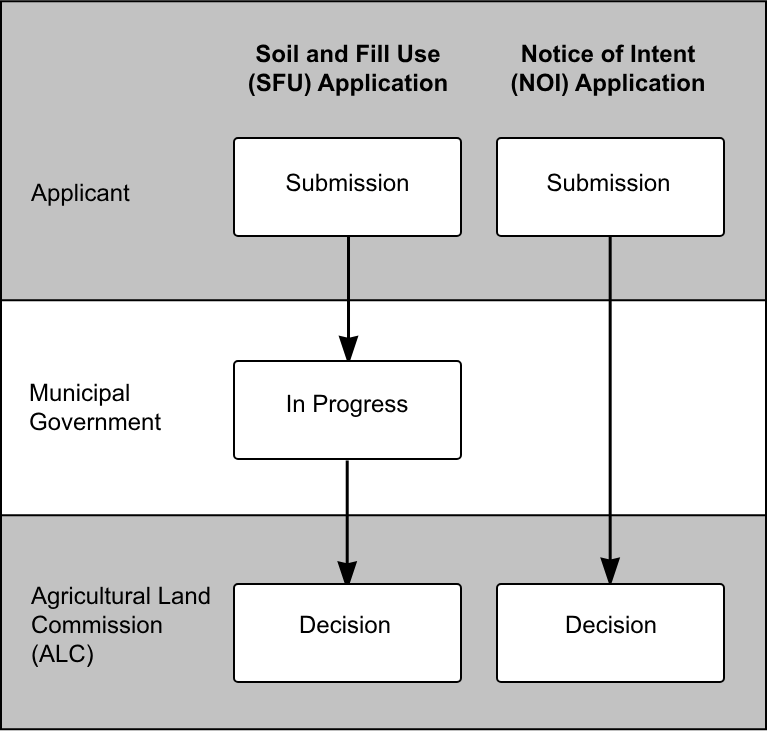
<style>
.page{position:relative;width:767px;height:731px;background:#c2c2c2}
.page>*{position:absolute;margin:0}
.t1{font:24px "Arial-BoldMT";color:#000000}
.t2{font:24px "ArialMT";color:#000000}
</style>
<div class="page">
<p class="t1" style="left:249px;top:44px;width:198px;height:53px;text-align:center">Soil and Fill Use (SFU) Application</p>
<p class="t1" style="left:511px;top:44px;width:193px;height:53px;text-align:center">Notice of Intent (NOI) Application</p>
<p class="t2" style="left:286px;top:173px;width:122px;height:19px">Submission</p>
<p class="t2" style="left:547px;top:173px;width:122px;height:19px">Submission</p>
<p class="t2" style="left:30px;top:183px;width:100px;height:23px">Applicant</p>
<p class="t2" style="left:30px;top:383px;width:131px;height:48px">Municipal Government</p>
<p class="t2" style="left:287px;top:394px;width:121px;height:24px">In Progress</p>
<p class="t2" style="left:30px;top:586px;width:180px;height:82px">Agricultural Land Commission (ALC)</p>
<p class="t2" style="left:300px;top:615px;width:90px;height:19px">Decision</p>
<p class="t2" style="left:566px;top:615px;width:90px;height:19px">Decision</p>
</div>
